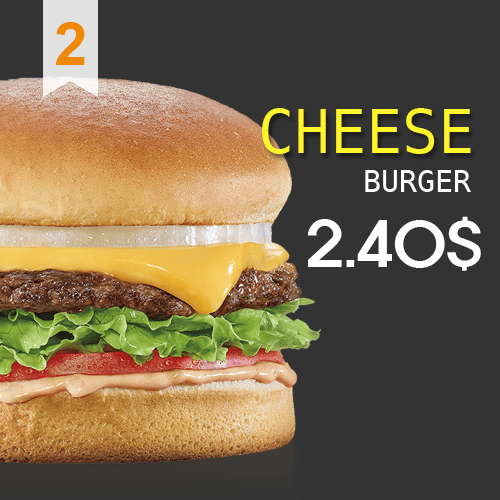
<style>
.page{position:relative;width:500px;height:500px;background:#333333}
.page>*{position:absolute;margin:0}
.t1{font:60px "Arial-BoldMT";color:#ee8805}
.t2{font:60px "DejaVuSansMono";color:#fff32b}
.t3{font:30px "DejaVuSansMono";color:#ffffff}
.t4{font:60px "ExpoM-HM";color:#ffffff}
</style>
<div class="page">
<p class="t1" style="left:55px;top:22px;width:30px;height:43px">2</p>
<p class="t2" style="left:262px;top:108px;width:209px;height:46px">CHEESE</p>
<p class="t3" style="left:365px;top:170px;width:106px;height:22px">BURGER</p>
<p class="t4" style="left:308px;top:216px;width:173px;height:55px">2.40$</p>
</div>
